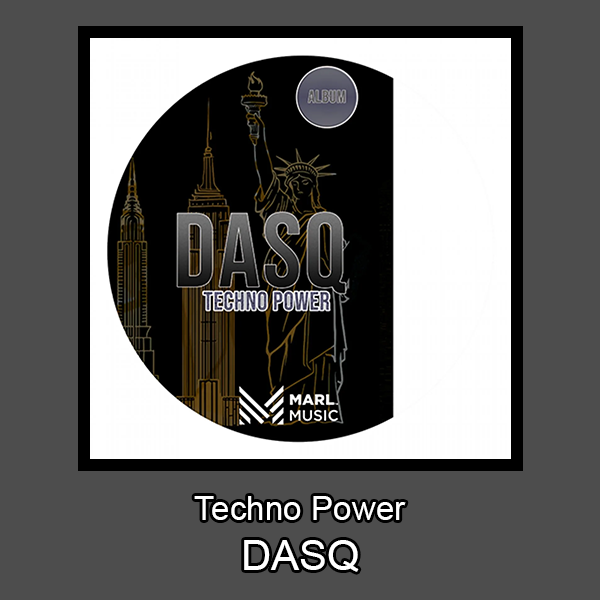
<style>
.page{position:relative;width:600px;height:600px;background:#4d4d4d}
.page>*{position:absolute;margin:0}
.t1{font:33.3px "ArialMT";color:#ffffff}
.t2{font:41.7px "ArialMT";color:#ffffff}
</style>
<div class="page">
<p class="t1" style="left:194px;top:496px;width:212px;height:76px;text-align:center">Techno Power<br><span class="t2">DASQ</span></p>
</div>
